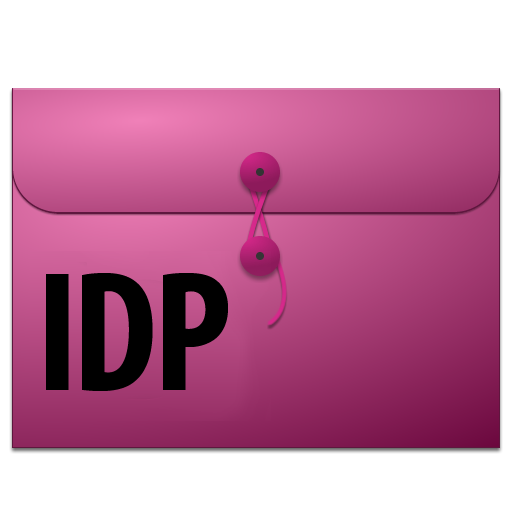
<style>
.page{position:relative;width:512px;height:512px;background:#ffffff}
.page>*{position:absolute;margin:0}
.t1{font:172.4px "MyriadPro-BoldCond";letter-spacing:-0.02em;color:#000000}
</style>
<div class="page">
<p class="t1" style="left:46px;top:273px;width:182px;height:118px">IDP</p>
</div>
